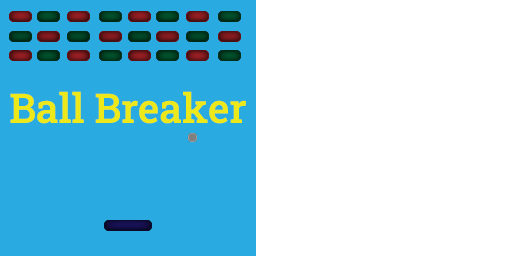
<style>
.page{position:relative;width:520px;height:256px;background:#ffffff}
.page>*{position:absolute;margin:0}
.t1{font:40.6px "RobotoSlab-Medium";color:#ece819}
</style>
<div class="page">
<p class="t1" style="left:10px;top:91px;width:236px;height:33px">Ball Breaker</p>
</div>
